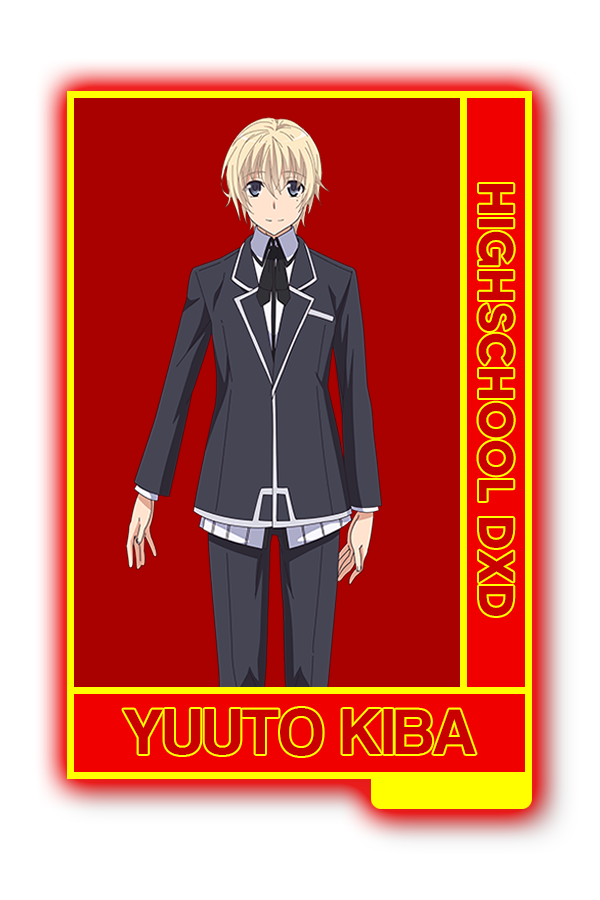
<style>
.page{position:relative;width:600px;height:900px;background:#a90000}
.page>*{position:absolute;margin:0}
.t1{font:48.8px "MADETOMMY-Bold";color:#ca0000}
.t2{font:67.4px "CoolveticaRg-Regular";color:#ca0000}
</style>
<div class="page">
<p class="t1" style="left:478px;top:184px;width:36px;height:432px;rotate:90deg">HIGHSCHOOL DXD</p>
<p class="t2" style="left:123px;top:708px;width:353px;height:48px">YUUTO KIBA</p>
</div>
